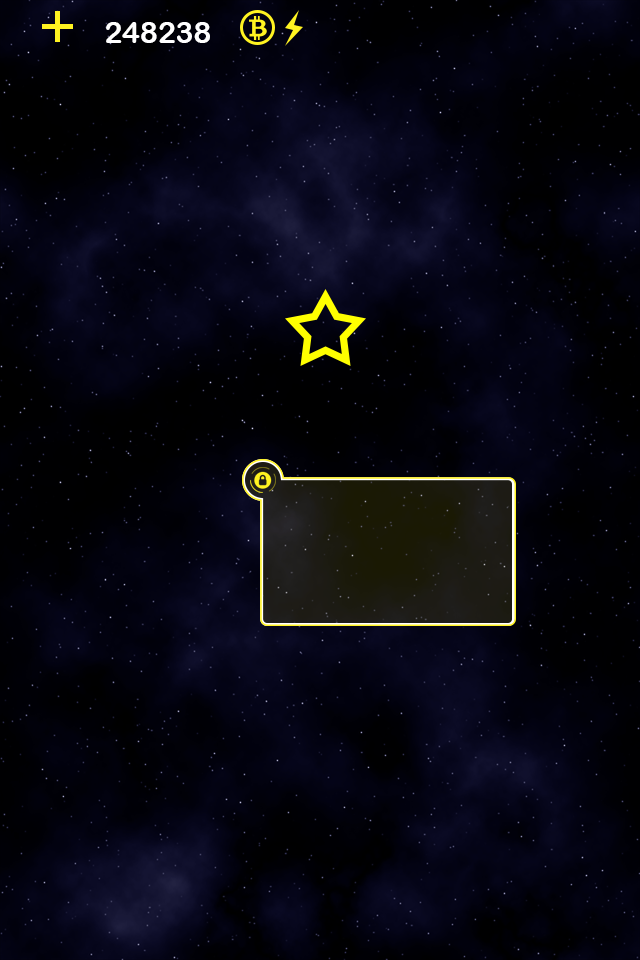
<style>
.page{position:relative;width:640px;height:960px}
.page>*{position:absolute;margin:0}
.t1{font:30px "ArialRoundedMTBold";color:#ffffff}
</style>
<div class="page">
<p class="t1" style="left:106px;top:22px;width:104px;height:21px">248238</p>
</div>
